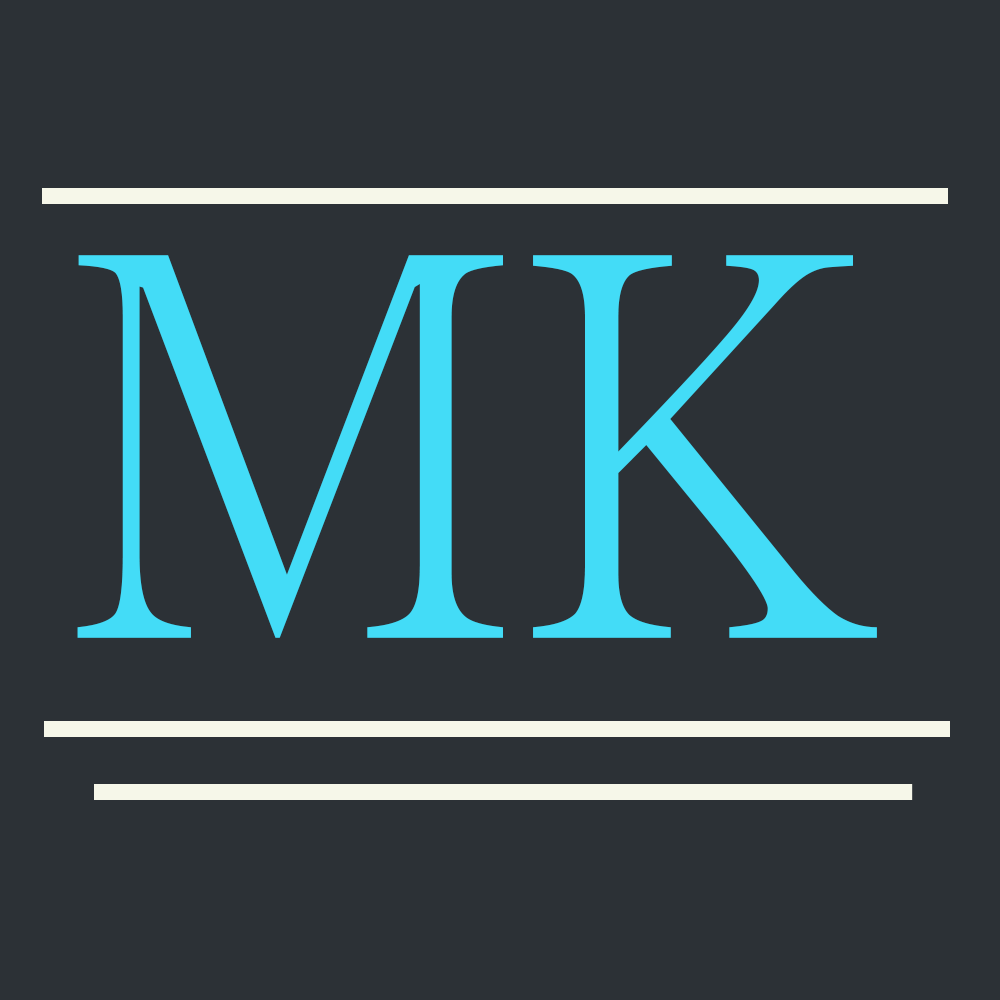
<style>
.page{position:relative;width:1000px;height:1000px;background:#2c3136}
.page>*{position:absolute;margin:0}
.t1{font:532px "PMingLiU-ExtB";color:#43dcf7}
</style>
<div class="page">
<p class="t1" style="left:77px;top:255px;width:800px;height:383px">MK</p>
</div>
